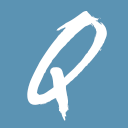
<style>
.page{position:relative;width:128px;height:128px;background:#5b93b3}
.page>*{position:absolute;margin:0}
.t1{font:145px "SuperSonic";color:#ffffff}
</style>
<div class="page">
<p class="t1" style="left:27px;top:11px;width:80px;height:110px">Q</p>
</div>
